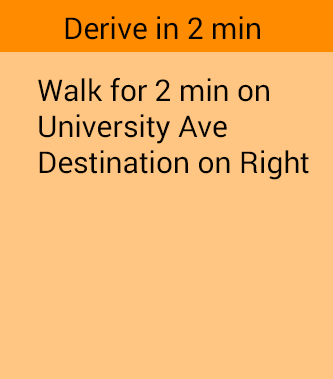
<style>
.page{position:relative;width:333px;height:379px;background:#ffc683}
.page>*{position:absolute;margin:0}
.t1{font:30px "Roboto-Black";color:#050300}
</style>
<div class="page">
<p class="t1" style="left:65px;top:16px;width:195px;height:24px">Derive in 2 min</p>
<p class="t1" style="left:38px;top:77px;width:271px;height:103px">Walk for 2 min on <br>University Ave<br>Destination on Right</p>
</div>
